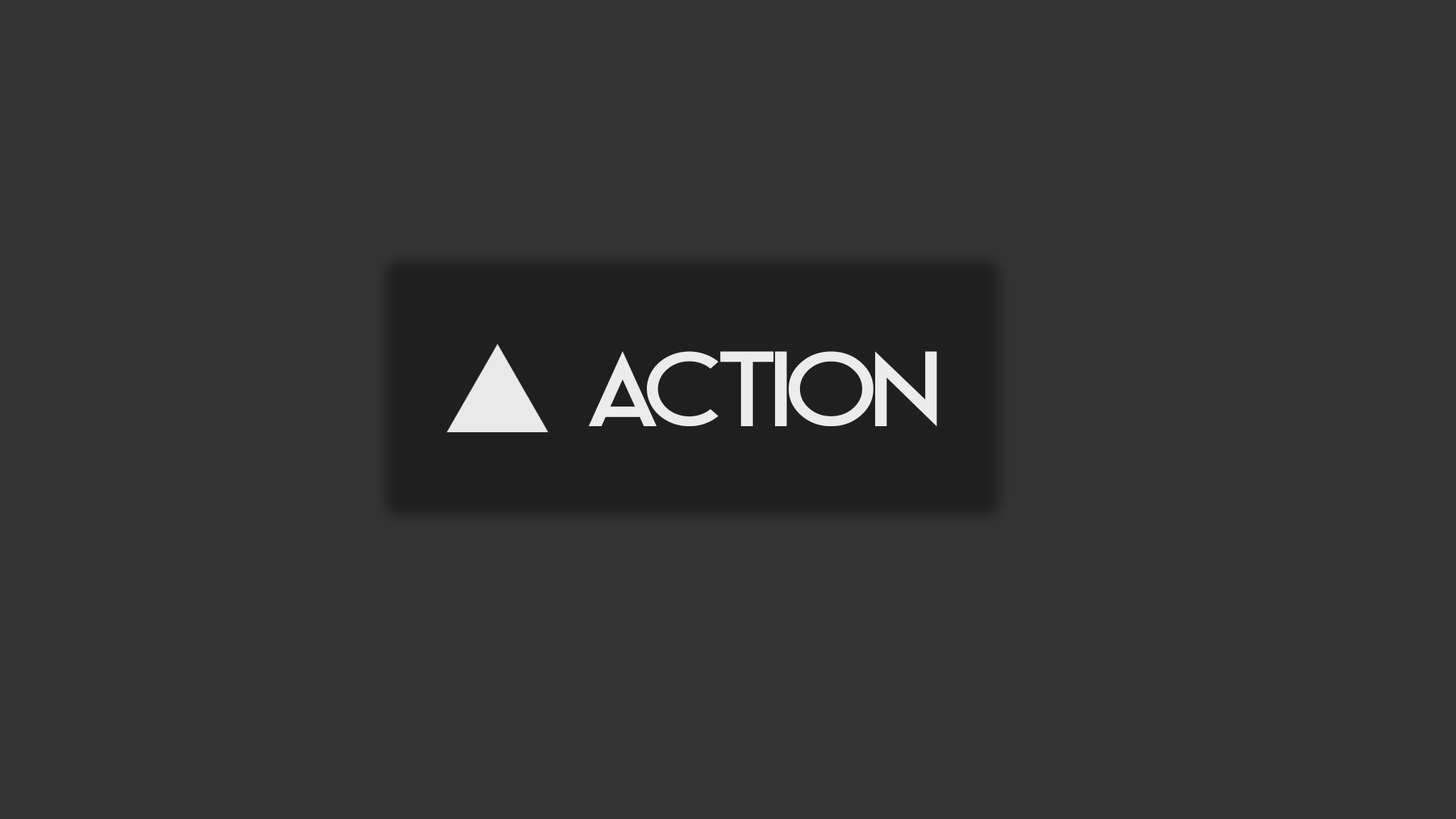
<style>
.page{position:relative;width:1456px;height:819px;background:#333333}
.page>*{position:absolute;margin:0}
.t1{font:93.4px "AlpacaScarlettDemo";letter-spacing:-0.04em;color:#ffffff;scale:1.13 1}
</style>
<div class="page">
<p class="t1" style="left:588px;top:351px;width:349px;height:75px;opacity:0.9">ACTION</p>
</div>
